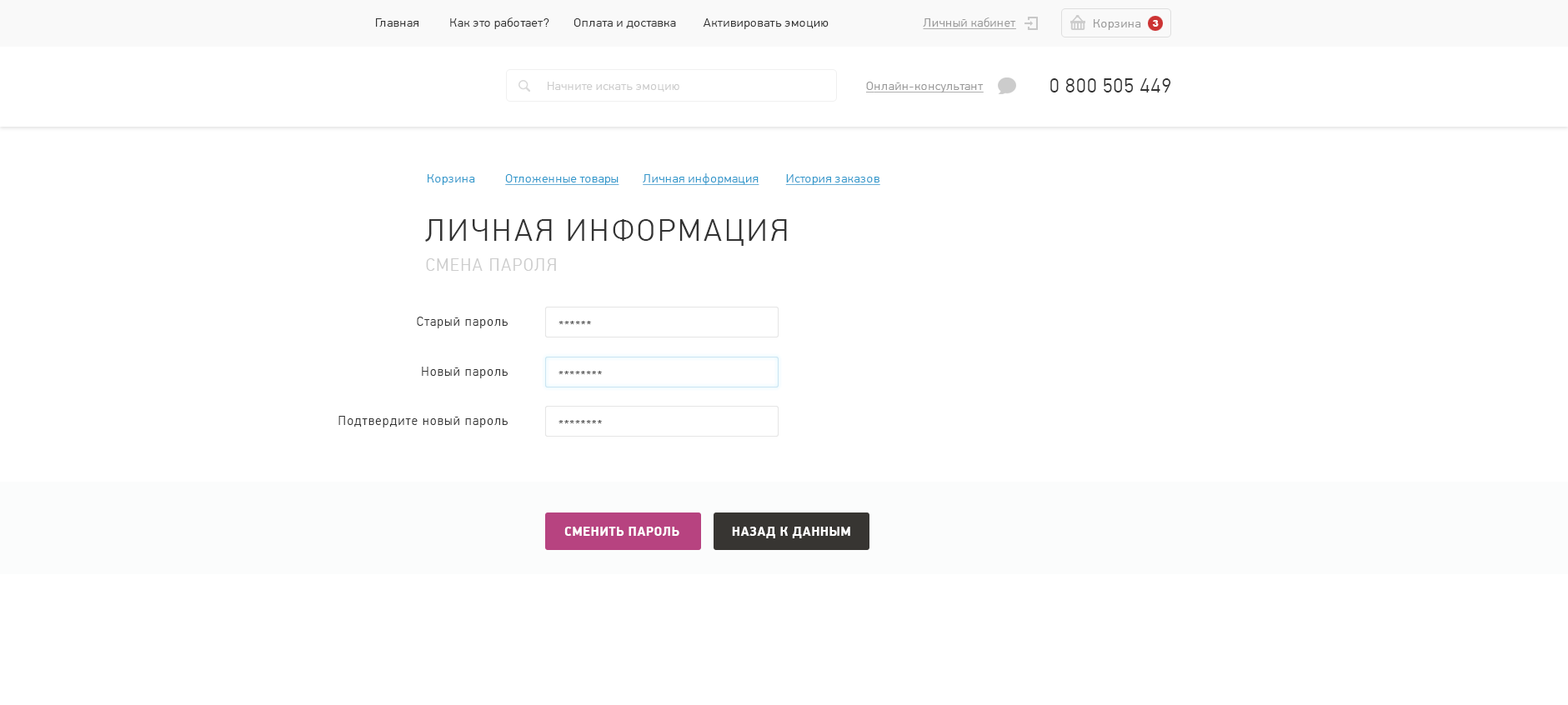
<style>
.page{position:relative;width:1568px;height:705px;background:#ffffff}
.page>*{position:absolute;margin:0}
.t1{font:12.5px "PFDinTextPro-Light";letter-spacing:0.04em;color:#333333}
.t2{font:12.5px "PFDinTextPro-Light";letter-spacing:0.04em;color:#333333;text-transform:uppercase}
.t3{font:12.5px "PFDinTextPro-Light";letter-spacing:0.04em;color:#999999;text-decoration:underline}
.t4{font:12.5px "PFDinTextPro-Light";letter-spacing:0.04em;color:#999999;text-transform:uppercase;text-decoration:underline}
.t5{font:12.5px "PFDinTextPro-Light";letter-spacing:0.04em;color:#999999}
.t6{font:12.5px "PFDinTextPro-Light";letter-spacing:0.04em;color:#999999;text-transform:uppercase}
.t7{font:9.2px "Arial-Black";letter-spacing:0.04em;color:#ffffff;text-transform:uppercase}
.t8{font:12.5px "PFDinTextPro-Light";letter-spacing:0.04em;color:#cccccc}
.t9{font:20px "PFDinTextPro-Light";letter-spacing:0.04em;color:#333333;text-transform:uppercase}
.t10{font:12.5px "PFDinTextPro-Light";letter-spacing:0.04em;color:#3399cc;text-decoration:underline}
.t11{font:12.5px "PFDinTextPro-Light";letter-spacing:0.04em;color:#3399cc}
.t12{font:12.5px "PFDinTextPro-Light";letter-spacing:0.04em;color:#3399cc;text-transform:uppercase;text-decoration:underline}
.t13{font:32.1px "PFDinTextPro-Light";letter-spacing:0.09em;color:#333333;scale:0.96 1}
.t14{font:17.3px "PFDinTextPro-Light";letter-spacing:0.09em;color:#cccccc;text-transform:uppercase;scale:0.96 1}
.t15{font:13px "PFDinTextPro-Light";letter-spacing:0.09em;color:#333333;scale:0.96 1}
.t16{font:13px "PFDinDisplayPro-Black";letter-spacing:0.05em;color:#ffffff;text-transform:uppercase;scale:0.96 1}
</style>
<div class="page">
<p class="t1" style="left:376px;top:18px;width:453px;height:11px"><span class="t2">Г</span>лавная          <span class="t2">к</span>ак это работает?        Оплата и доставка         Активировать эмоцию</p>
<p class="t3" style="left:923px;top:18px;width:93px;height:11px"><span class="t4">л</span>ичный кабинет</p>
<p class="t5" style="left:1094px;top:19px;width:47px;height:11px"><span class="t6">К</span>орзина</p>
<p class="t7" style="left:1152px;top:20px;width:7px;height:7px">3</p>
<p class="t8" style="left:548px;top:82px;width:131px;height:10px">Начните искать эмоцию</p>
<p class="t3" style="left:866px;top:82px;width:118px;height:11px"><span class="t4">О</span>нлайн-консультант</p>
<p class="t9" style="left:1050px;top:78px;width:121px;height:15px">0 800 505 449</p>
<p class="t10" style="left:428px;top:173px;width:452px;height:12px"><span class="t11">Корзина          </span><span class="t12">О</span>тложенные товары        Личная информация         История заказов</p>
<p class="t13" style="left:425px;top:219px;width:362px;height:27px">ЛИЧНАЯ ИНФОРМАЦИЯ</p>
<p class="t14" style="left:426px;top:258px;width:130px;height:13px">СМЕНА ПАРОЛЯ</p>
<p class="t15" style="left:417px;top:317px;width:91px;height:11px">Старый пароль</p>
<p class="t15" style="left:559px;top:321px;width:32px;height:3px">******</p>
<p class="t15" style="left:422px;top:367px;width:86px;height:11px">Новый пароль</p>
<p class="t15" style="left:559px;top:371px;width:43px;height:3px">********</p>
<p class="t15" style="left:338px;top:416px;width:170px;height:12px">Подтвердите новый пароль</p>
<p class="t15" style="left:559px;top:420px;width:43px;height:3px">********</p>
<p class="t16" style="left:564px;top:527px;width:115px;height:9px">сменить пароль</p>
<p class="t16" style="left:732px;top:527px;width:118px;height:12px">назад к данным</p>
</div>
